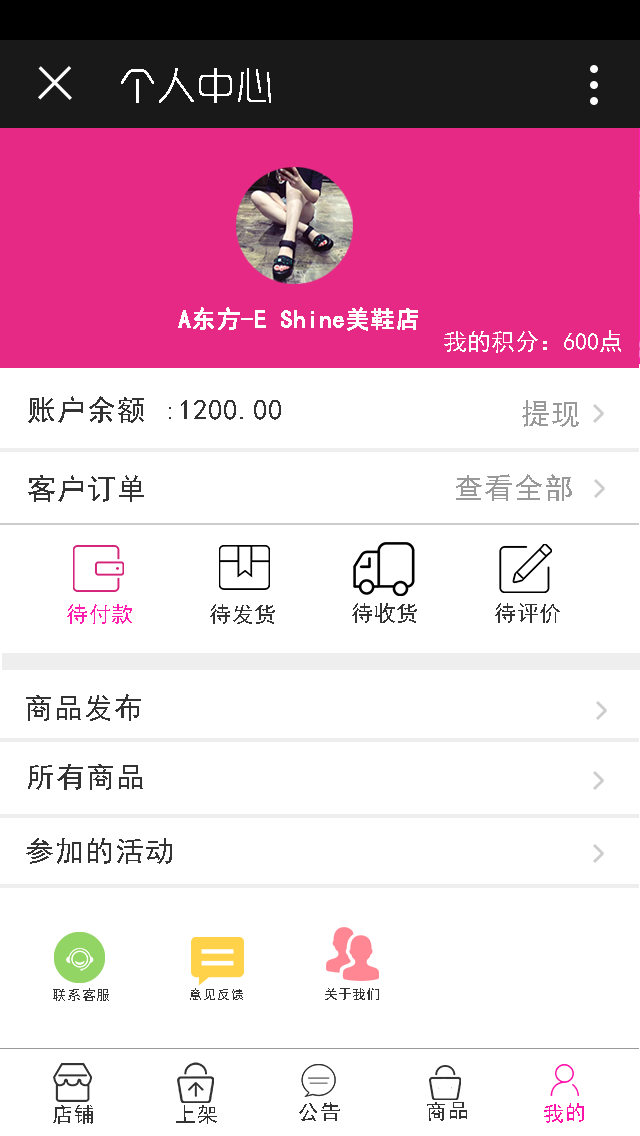
<style>
.page{position:relative;width:640px;height:1136px;background:#ffffff}
.page>*{position:absolute;margin:0}
.t1{font:38px "RTWSYueGoG0v1-ExLight";color:#ffffff;font-weight:bold}
.t2{font:24px "SimHei";color:#ffffff;font-weight:bold}
.t3{font:24px "SimHei";color:#ffffff}
.t4{font:50px "SimHei";color:#333333}
.t5{font:50px "SimHei";color:#999999}
.t6{font:37.6px "SimHei";color:#ff1cae}
.t7{font:37.5px "SimHei";color:#333333}
.t8{font:37.4px "SimHei";color:#333333}
.t9{font:24.3px "SimHei";color:#333333}
.t10{font:22.8px "SimHei";color:#333333}
.t11{font:23.6px "SimHei";color:#333333}
.t12{font:36px "SimHei";color:#333333}
.t13{font:36px "SimHei";color:#ff15aa}
</style>
<div class="page">
<p class="t1" style="left:121px;top:68px;width:150px;height:35px">个人中心</p>
<p class="t2" style="left:178px;top:307px;width:240px;height:24px">A东方-E Shine美鞋店</p>
<p class="t3" style="left:444px;top:330px;width:177px;height:23px">我的积分：600点</p>
<p class="t4" style="left:28px;top:396px;width:116px;height:27px">账户余额</p>
<p class="t4" style="left:169px;top:400px;width:112px;height:20px">:1200.00</p>
<p class="t5" style="left:522px;top:400px;width:57px;height:27px">提现</p>
<p class="t4" style="left:28px;top:475px;width:116px;height:27px">客户订单</p>
<p class="t5" style="left:456px;top:474px;width:116px;height:27px">查看全部</p>
<p class="t6" style="left:67px;top:604px;width:65px;height:20px">待付款</p>
<p class="t7" style="left:210px;top:604px;width:65px;height:20px">待发货</p>
<p class="t7" style="left:352px;top:603px;width:65px;height:20px">待收货</p>
<p class="t8" style="left:495px;top:603px;width:65px;height:20px">待评价</p>
<p class="t4" style="left:26px;top:694px;width:115px;height:27px">商品发布</p>
<p class="t4" style="left:28px;top:764px;width:115px;height:26px">所有商品</p>
<p class="t4" style="left:26px;top:838px;width:146px;height:26px">参加的活动</p>
<p class="t9" style="left:53px;top:988px;width:56px;height:13px">联系客服</p>
<p class="t10" style="left:190px;top:988px;width:53px;height:12px">意见反馈</p>
<p class="t11" style="left:325px;top:988px;width:54px;height:12px">关于我们</p>
<p class="t12" style="left:53px;top:1105px;width:40px;height:19px;rotate:-1deg">店铺</p>
<p class="t12" style="left:176px;top:1105px;width:41px;height:19px;rotate:-1deg">上架</p>
<p class="t12" style="left:299px;top:1102px;width:41px;height:19px;rotate:-1deg">公告</p>
<p class="t12" style="left:427px;top:1102px;width:40px;height:19px;rotate:-1deg">商品</p>
<p class="t13" style="left:544px;top:1103px;width:40px;height:20px;rotate:-1deg">我的</p>
</div>
